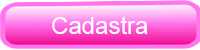
<style>
.page{position:relative;width:200px;height:50px}
.page>*{position:absolute;margin:0}
.t1{font:24px "ArialMT";color:#fefefe}
</style>
<div class="page">
<p class="t1" style="left:52px;top:16px;width:96px;height:18px">Cadastra</p>
</div>
